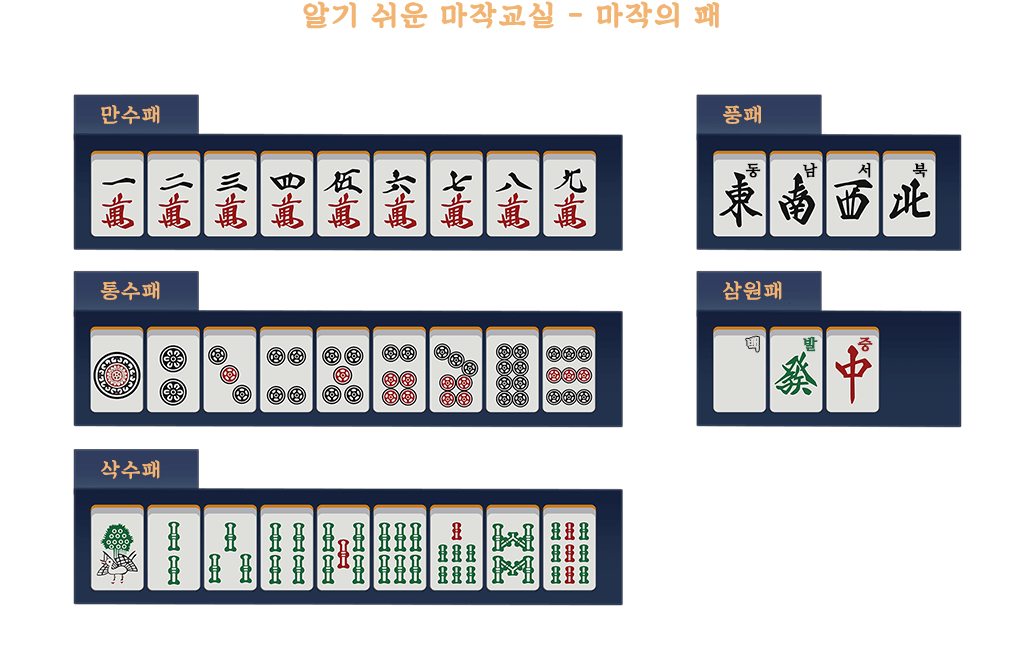
<style>
.page{position:relative;width:1024px;height:647px;background:#ffffff}
.page>*{position:absolute;margin:0}
.t1{font:29px "SDKukdetopokki-aLt";letter-spacing:0.06em;color:#f1b472;font-weight:bold}
.t2{font:21px "SDKukdetopokki-aLt";letter-spacing:0.06em;color:#f1b472}
.t3{font:15px "NanumMyeongjoBold";letter-spacing:0.06em;color:#000000;font-weight:bold}
.t4{font:15px "NanumMyeongjoExtraBold";letter-spacing:0.06em;color:#dfdfdc;font-weight:bold}
.t5{font:15px "NanumMyeongjoExtraBold";letter-spacing:0.06em;color:#1c673f;font-weight:bold}
.t6{font:15px "NanumMyeongjoExtraBold";letter-spacing:0.06em;color:#971b1b;font-weight:bold}
</style>
<div class="page">
<p class="t1" style="left:303px;top:1px;width:416px;height:28px">알기 쉬운 마작교실 - 마작의 패</p>
<p class="t2" style="left:101px;top:105px;width:59px;height:20px">만수패</p>
<p class="t2" style="left:723px;top:105px;width:38px;height:19px">풍패</p>
<p class="t3" style="left:745px;top:163px;width:16px;height:15px">동</p>
<p class="t3" style="left:803px;top:162px;width:15px;height:16px">남</p>
<p class="t3" style="left:858px;top:162px;width:13px;height:16px">서</p>
<p class="t3" style="left:912px;top:162px;width:16px;height:16px">북</p>
<p class="t2" style="left:100px;top:281px;width:60px;height:20px">통수패</p>
<p class="t2" style="left:723px;top:281px;width:59px;height:19px">삼원패</p>
<p class="t4" style="left:746px;top:336px;width:13px;height:16px">백</p>
<p class="t5" style="left:803px;top:336px;width:15px;height:16px">발</p>
<p class="t6" style="left:857px;top:337px;width:16px;height:15px">중</p>
<p class="t2" style="left:101px;top:460px;width:59px;height:20px">삭수패</p>
</div>
